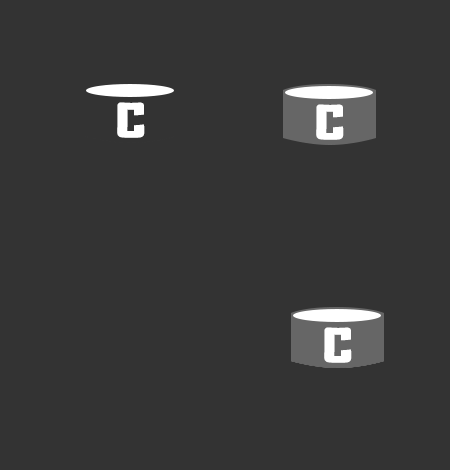
<style>
.page{position:relative;width:450px;height:470px;background:#333333}
.page>*{position:absolute;margin:0}
.t1{font:45.8px "AgencyFB-Black";color:#ffffff}
</style>
<div class="page">
<p class="t1" style="left:324px;top:327px;width:28px;height:36px">C</p>
</div>
